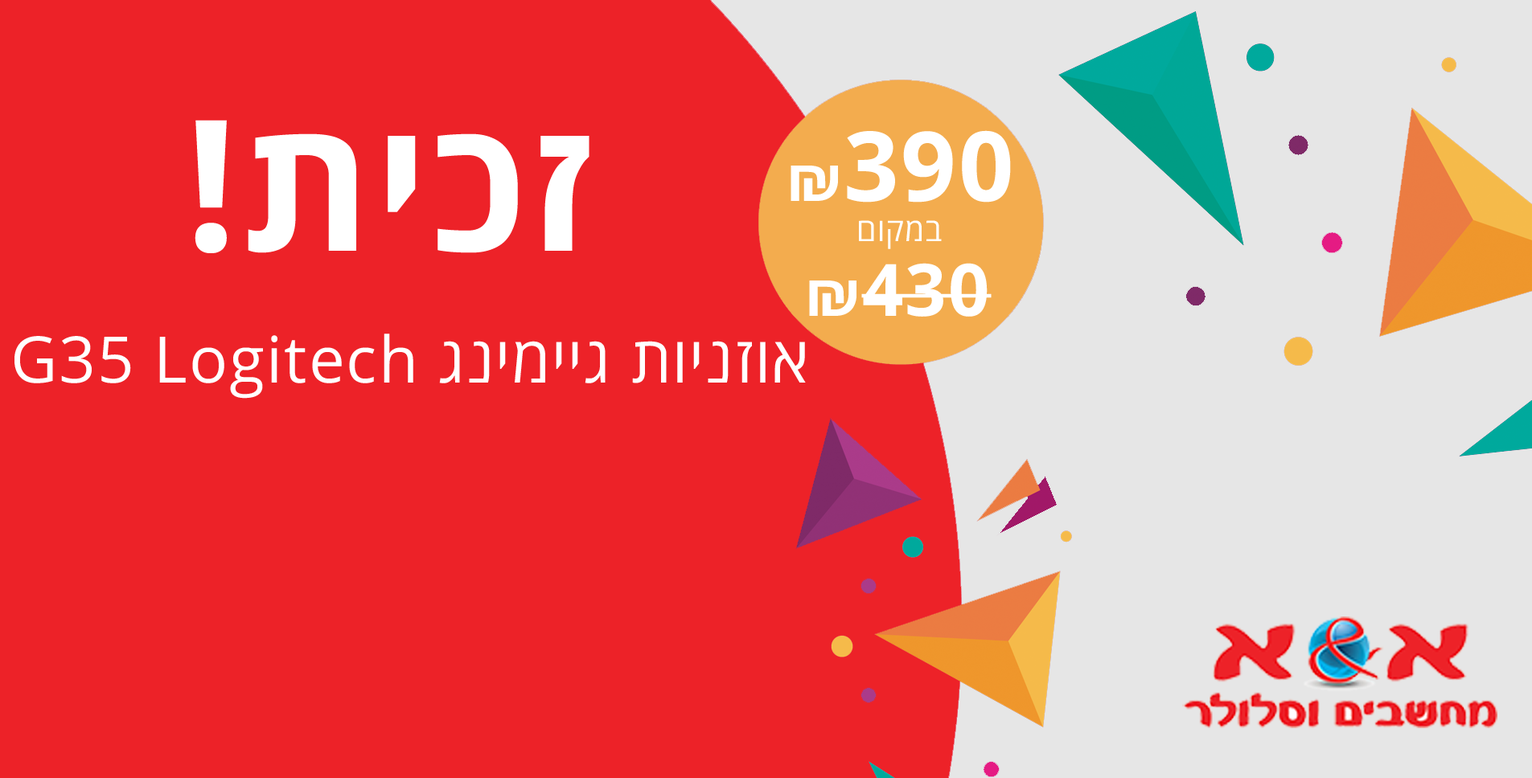
<style>
.page{position:relative;width:1532px;height:778px;background:#ed2228}
.page>*{position:absolute;margin:0}
.t1{font:182.9px "OpenSansHebrew-Bold";letter-spacing:0.025em;color:#ffffff}
.t2{font:96.5px "OpenSansHebrew-Bold";letter-spacing:0.025em;color:#ffffff}
.t3{font:56.3px "OpenSansHebrew-Bold";letter-spacing:0.025em;color:#ffffff}
.t4{font:32.2px "OpenSansHebrew-Regular";letter-spacing:0.025em;color:#ffffff}
.t5{font:72.4px "OpenSansHebrew-Bold";letter-spacing:0.025em;color:#ffffff}
.t6{font:64.3px "OpenSansHebrew-Regular";letter-spacing:0.025em;color:#ffffff}
</style>
<div class="page">
<p class="t1" style="left:195px;top:120px;width:394px;height:133px">!תיכז</p>
<p class="t2" style="left:790px;top:130px;width:221px;height:73px"><span class="t3">₪</span>390</p>
<p class="t4" style="left:859px;top:220px;width:83px;height:29px">םוקמב</p>
<p class="t5" style="left:809px;top:263px;width:183px;height:54px"><span class="t3">₪</span>430</p>
<p class="t6" style="left:14px;top:334px;width:792px;height:65px">G35 Logitech גנימייג תוינזוא</p>
</div>
